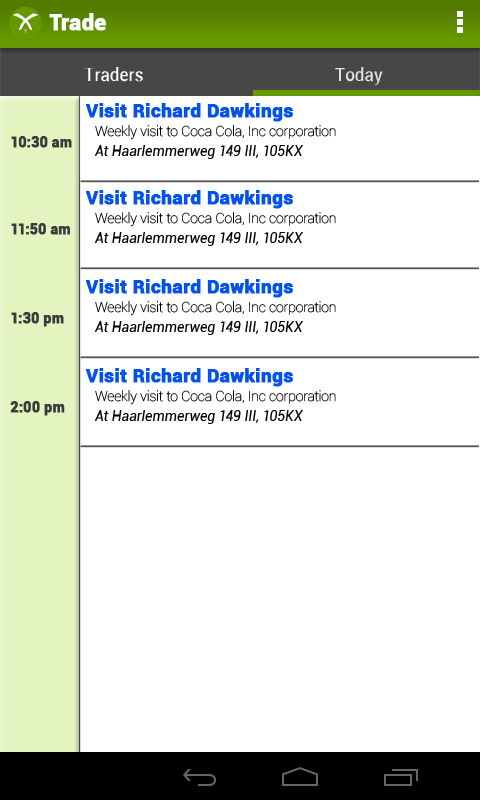
<style>
.page{position:relative;width:480px;height:800px;background:#ffffff}
.page>*{position:absolute;margin:0}
.t1{font:22px "Roboto-Black";color:#fefefe;font-weight:bold}
.t2{font:18px "Roboto-Condensed";color:#ffffff;scale:1.1 1}
.t3{font:18px "Roboto-Condensed";color:#e1e1e1;scale:1.1 1}
.t4{font:19px "Roboto-Black";color:#0351f1;font-weight:bold}
.t5{font:14px "Roboto-Thin";color:#000000}
.t6{font:14px "Roboto-Black";color:#3b3b3b;font-weight:bold}
.t7{font:14px "Roboto-Italic";color:#000000}
</style>
<div class="page">
<p class="t1" style="left:49px;top:13px;width:57px;height:18px">Trade</p>
<p class="t2" style="left:84px;top:67px;width:59px;height:15px">Traders</p>
<p class="t3" style="left:335px;top:67px;width:48px;height:19px">Today</p>
<p class="t4" style="left:85px;top:103px;width:208px;height:19px">Visit Richard Dawkings</p>
<p class="t5" style="left:95px;top:125px;width:241px;height:15px">Weekly visit to Coca Cola, Inc corporation</p>
<p class="t6" style="left:11px;top:136px;width:61px;height:12px">10:30 am</p>
<p class="t7" style="left:94px;top:145px;width:209px;height:14px">At Haarlemmerweg 149 III, 105KX</p>
<p class="t4" style="left:85px;top:190px;width:208px;height:19px">Visit Richard Dawkings</p>
<p class="t5" style="left:95px;top:212px;width:241px;height:15px">Weekly visit to Coca Cola, Inc corporation</p>
<p class="t6" style="left:11px;top:223px;width:59px;height:12px">11:50 am</p>
<p class="t7" style="left:94px;top:232px;width:209px;height:14px">At Haarlemmerweg 149 III, 105KX</p>
<p class="t4" style="left:85px;top:279px;width:208px;height:19px">Visit Richard Dawkings</p>
<p class="t5" style="left:95px;top:301px;width:241px;height:15px">Weekly visit to Coca Cola, Inc corporation</p>
<p class="t6" style="left:11px;top:312px;width:53px;height:15px">1:30 pm</p>
<p class="t7" style="left:94px;top:321px;width:209px;height:14px">At Haarlemmerweg 149 III, 105KX</p>
<p class="t4" style="left:85px;top:368px;width:208px;height:19px">Visit Richard Dawkings</p>
<p class="t5" style="left:95px;top:390px;width:241px;height:15px">Weekly visit to Coca Cola, Inc corporation</p>
<p class="t6" style="left:10px;top:401px;width:55px;height:15px">2:00 pm</p>
<p class="t7" style="left:94px;top:410px;width:209px;height:14px">At Haarlemmerweg 149 III, 105KX</p>
</div>
